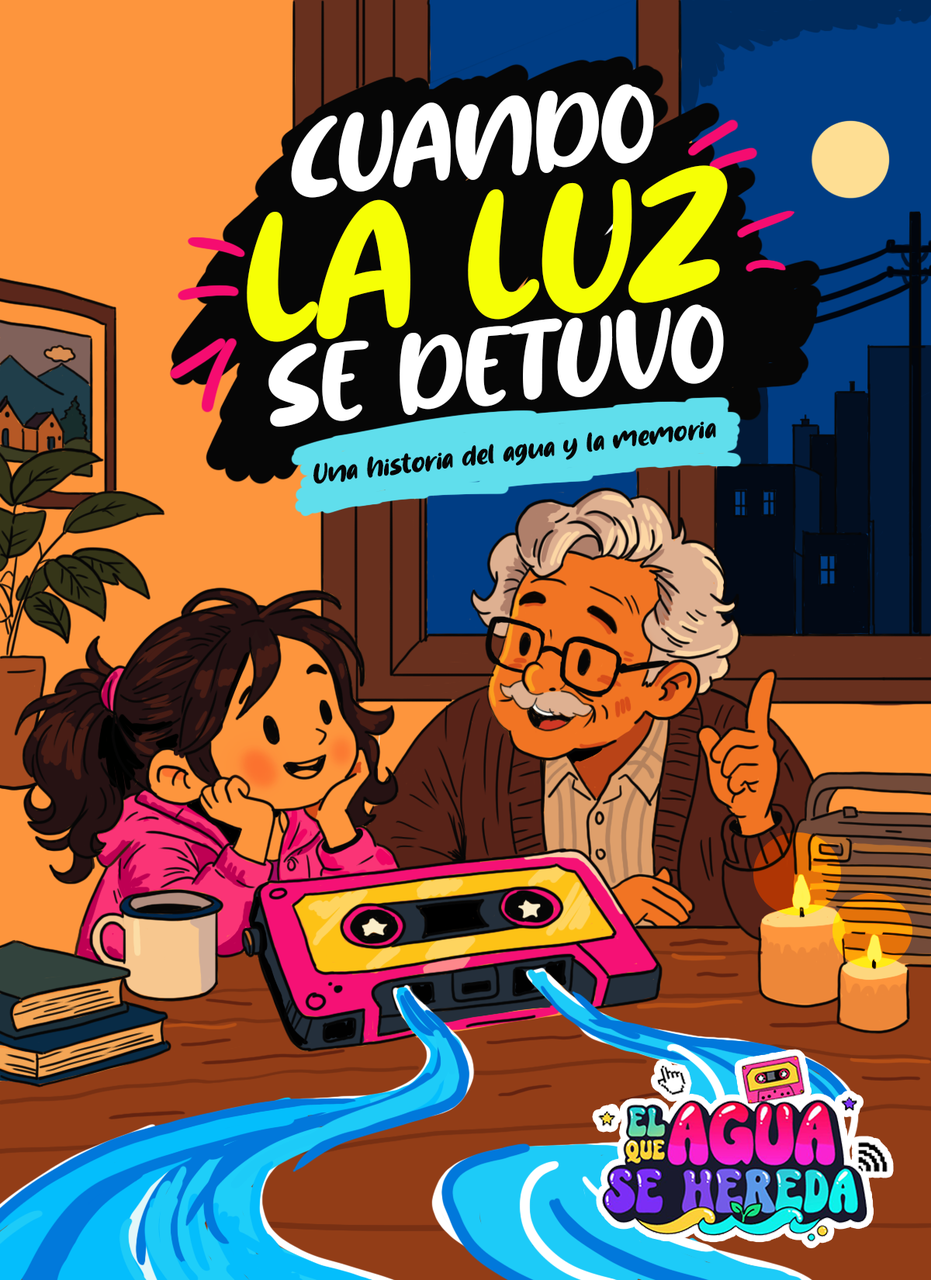
<style>
.page{position:relative;width:931px;height:1280px}
.page>*{position:absolute;margin:0}
.t1{font:122.8px "LemonSliceRegular";color:#ffffff}
.t2{font:201.7px "LemonSliceRegular";color:#f6ff05}
.t3{font:31.7px "LemonSliceRegular";color:#060606}
</style>
<div class="page">
<p class="t1" style="left:291px;top:84px;width:363px;height:114px;rotate:-6deg">CUANDO</p>
<p class="t2" style="left:247px;top:165px;width:481px;height:177px;rotate:-6deg">LA LUZ</p>
<p class="t1" style="left:269px;top:304px;width:455px;height:123px;rotate:-6deg">SE DETUVO</p>
<p class="t3" style="left:314px;top:421px;width:402px;height:63px;rotate:-7deg">Una historia del agua y la memoria</p>
</div>
